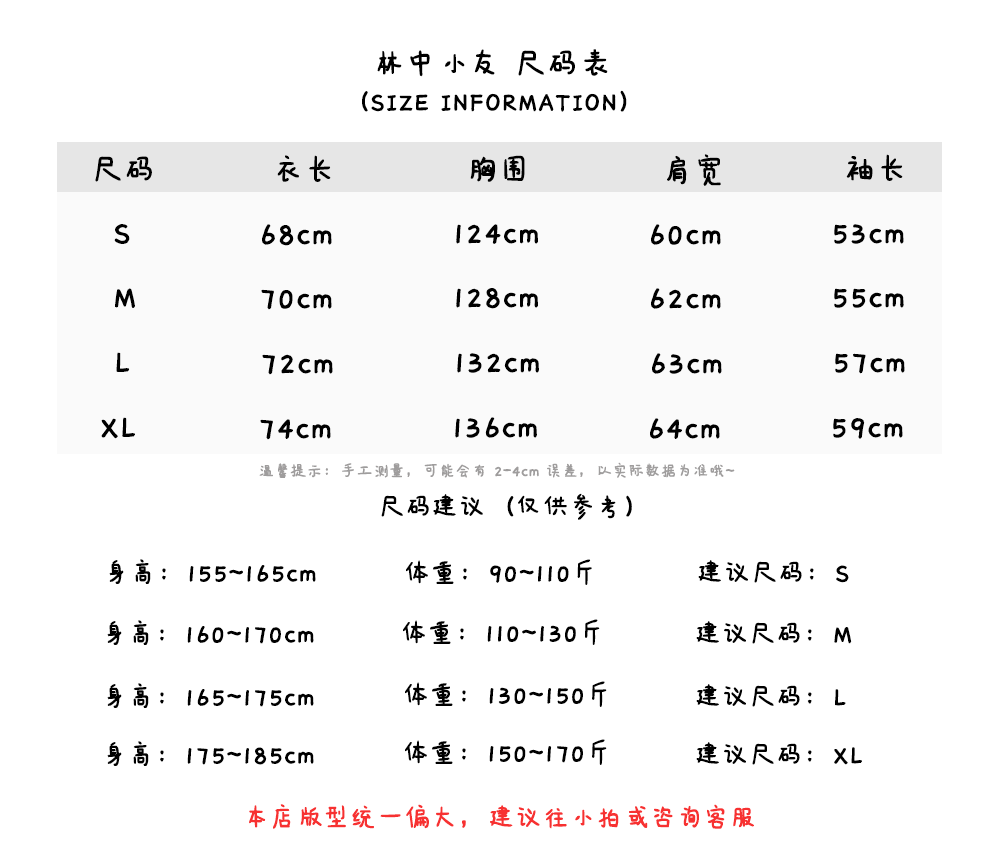
<style>
.page{position:relative;width:1000px;height:862px;background:#ffffff}
.page>*{position:absolute;margin:0}
.t1{font:36px "IdeaFonts-QianXiaTi";color:#000000;font-weight:bold}
.t2{font:30px "IdeaFonts-QianXiaTi";color:#000000;font-weight:bold}
.t3{font:18px "IdeaFonts-QianXiaTi";color:#9f9d9d;font-weight:bold}
.t4{font:30px "IdeaFonts-QianXiaTi";color:#f73131;font-weight:bold}
</style>
<div class="page">
<p class="t1" style="left:377px;top:49px;width:231px;height:28px">林中小友 尺码表</p>
<p class="t2" style="left:362px;top:90px;width:265px;height:22px">（SIZE INFORMATION）</p>
<p class="t1" style="left:95px;top:156px;width:57px;height:26px">尺码</p>
<p class="t1" style="left:277px;top:155px;width:54px;height:27px">衣长</p>
<p class="t1" style="left:470px;top:155px;width:55px;height:27px">胸围</p>
<p class="t1" style="left:667px;top:154px;width:54px;height:32px">肩宽</p>
<p class="t1" style="left:846px;top:154px;width:57px;height:27px">袖长</p>
<p class="t1" style="left:114px;top:224px;width:16px;height:20px">S</p>
<p class="t1" style="left:262px;top:224px;width:70px;height:22px">68cm</p>
<p class="t1" style="left:456px;top:224px;width:82px;height:20px">124cm</p>
<p class="t1" style="left:651px;top:224px;width:70px;height:21px">60cm</p>
<p class="t1" style="left:834px;top:224px;width:70px;height:20px">53cm</p>
<p class="t1" style="left:115px;top:288px;width:20px;height:20px">M</p>
<p class="t1" style="left:261px;top:289px;width:71px;height:21px">70cm</p>
<p class="t1" style="left:456px;top:288px;width:82px;height:21px">128cm</p>
<p class="t1" style="left:651px;top:288px;width:70px;height:21px">62cm</p>
<p class="t1" style="left:834px;top:288px;width:70px;height:20px">55cm</p>
<p class="t1" style="left:116px;top:352px;width:14px;height:20px">L</p>
<p class="t1" style="left:457px;top:353px;width:82px;height:20px">132cm</p>
<p class="t1" style="left:652px;top:353px;width:70px;height:21px">63cm</p>
<p class="t1" style="left:835px;top:353px;width:70px;height:21px">57cm</p>
<p class="t1" style="left:262px;top:354px;width:71px;height:21px">72cm</p>
<p class="t1" style="left:101px;top:417px;width:34px;height:22px">XL</p>
<p class="t1" style="left:260px;top:419px;width:71px;height:21px">74cm</p>
<p class="t1" style="left:455px;top:417px;width:82px;height:21px">136cm</p>
<p class="t1" style="left:650px;top:418px;width:70px;height:21px">64cm</p>
<p class="t1" style="left:833px;top:418px;width:70px;height:21px">59cm</p>
<p class="t3" style="left:259px;top:462px;width:476px;height:16px">温馨提示：手工测量，可能会有 2-4cm 误差，以实际数据为准哦~</p>
<p class="t2" style="left:381px;top:493px;width:251px;height:27px">尺码建议（仅供参考）</p>
<p class="t2" style="left:109px;top:559px;width:207px;height:25px">身高：155~165cm</p>
<p class="t2" style="left:406px;top:559px;width:186px;height:26px">体重：90~110斤</p>
<p class="t2" style="left:698px;top:560px;width:151px;height:23px">建议尺码：S</p>
<p class="t2" style="left:107px;top:620px;width:207px;height:25px">身高：160~170cm</p>
<p class="t2" style="left:403px;top:619px;width:197px;height:26px">体重：110~130斤</p>
<p class="t2" style="left:696px;top:621px;width:156px;height:23px">建议尺码：M</p>
<p class="t2" style="left:107px;top:683px;width:207px;height:25px">身高：165~175cm</p>
<p class="t2" style="left:405px;top:681px;width:202px;height:26px">体重：130~150斤</p>
<p class="t2" style="left:696px;top:684px;width:150px;height:23px">建议尺码：L</p>
<p class="t2" style="left:107px;top:741px;width:207px;height:25px">身高：175~185cm</p>
<p class="t2" style="left:405px;top:739px;width:202px;height:26px">体重：150~170斤</p>
<p class="t2" style="left:696px;top:742px;width:166px;height:23px">建议尺码：XL</p>
<p class="t4" style="left:249px;top:804px;width:505px;height:25px">本店版型统一偏大，建议往小拍或咨询客服</p>
</div>
